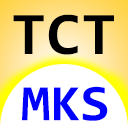
<style>
.page{position:relative;width:128px;height:128px;background:#ffffff}
.page>*{position:absolute;margin:0}
.t1{font:60.7px "Consolas-Bold";color:#000000;scale:1.05 1}
.t2{font:51.5px "Consolas-Bold";color:#0000ff;scale:1.05 1}
</style>
<div class="page">
<p class="t1" style="left:13px;top:14px;width:101px;height:41px">TCT</p>
<p class="t2" style="left:22px;top:86px;width:86px;height:35px">MKS</p>
</div>
